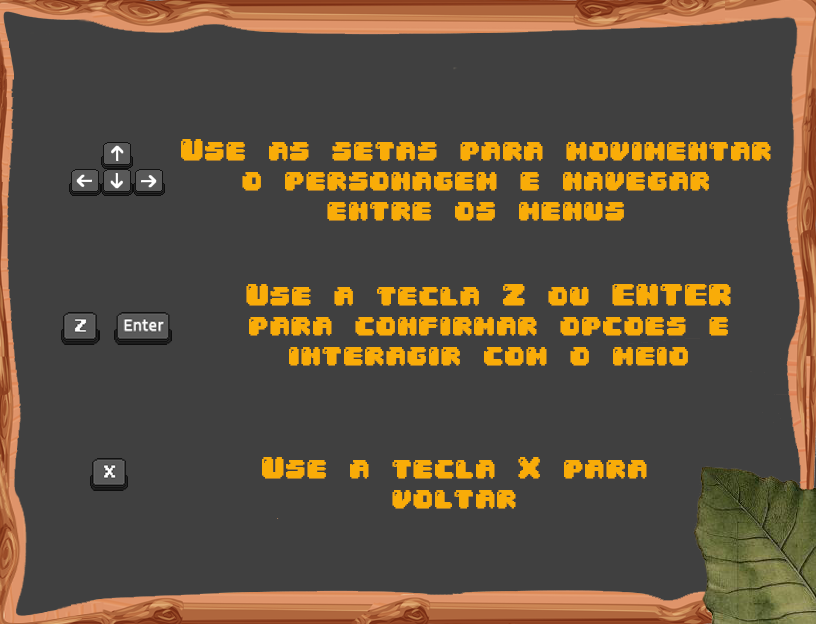
<style>
.page{position:relative;width:816px;height:624px;background:#404040}
.page>*{position:absolute;margin:0}
.t1{font:25px "04b30";color:#f9ac08;font-weight:bold}
</style>
<div class="page">
<p class="t1" style="left:181px;top:139px;width:590px;height:82px;text-align:center">Use as setas para movimentar o personagem e navegar entre os menus</p>
<p class="t1" style="left:246px;top:284px;width:485px;height:82px;text-align:center">Use a tecla Z ou ENTER para confirmar opcoes e interagir com o meio</p>
<p class="t1" style="left:262px;top:457px;width:385px;height:52px;text-align:center">Use a tecla X para <br>voltar</p>
</div>
